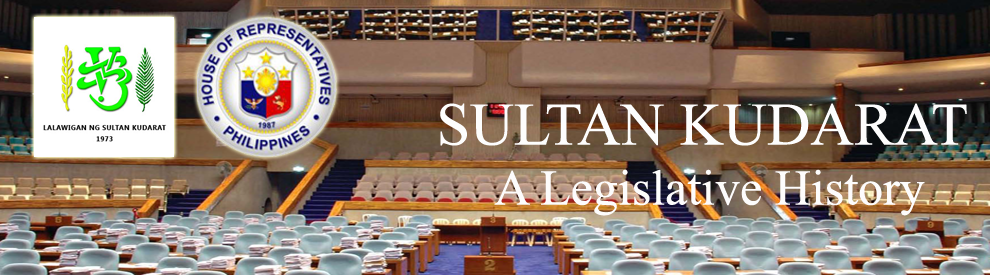
<style>
.page{position:relative;width:990px;height:275px}
.page>*{position:absolute;margin:0}
.t1{font:50px "TimesNewRomanPSMT";color:#fdfcfc}
.t2{font:60.4px "TimesNewRomanPSMT";color:#fdfdfd}
</style>
<div class="page">
<p class="t1" style="left:440px;top:103px;width:527px;height:113px;text-align:center"><span class="t2">SULTAN KUDARAT<br></span>A Legislative History</p>
</div>
